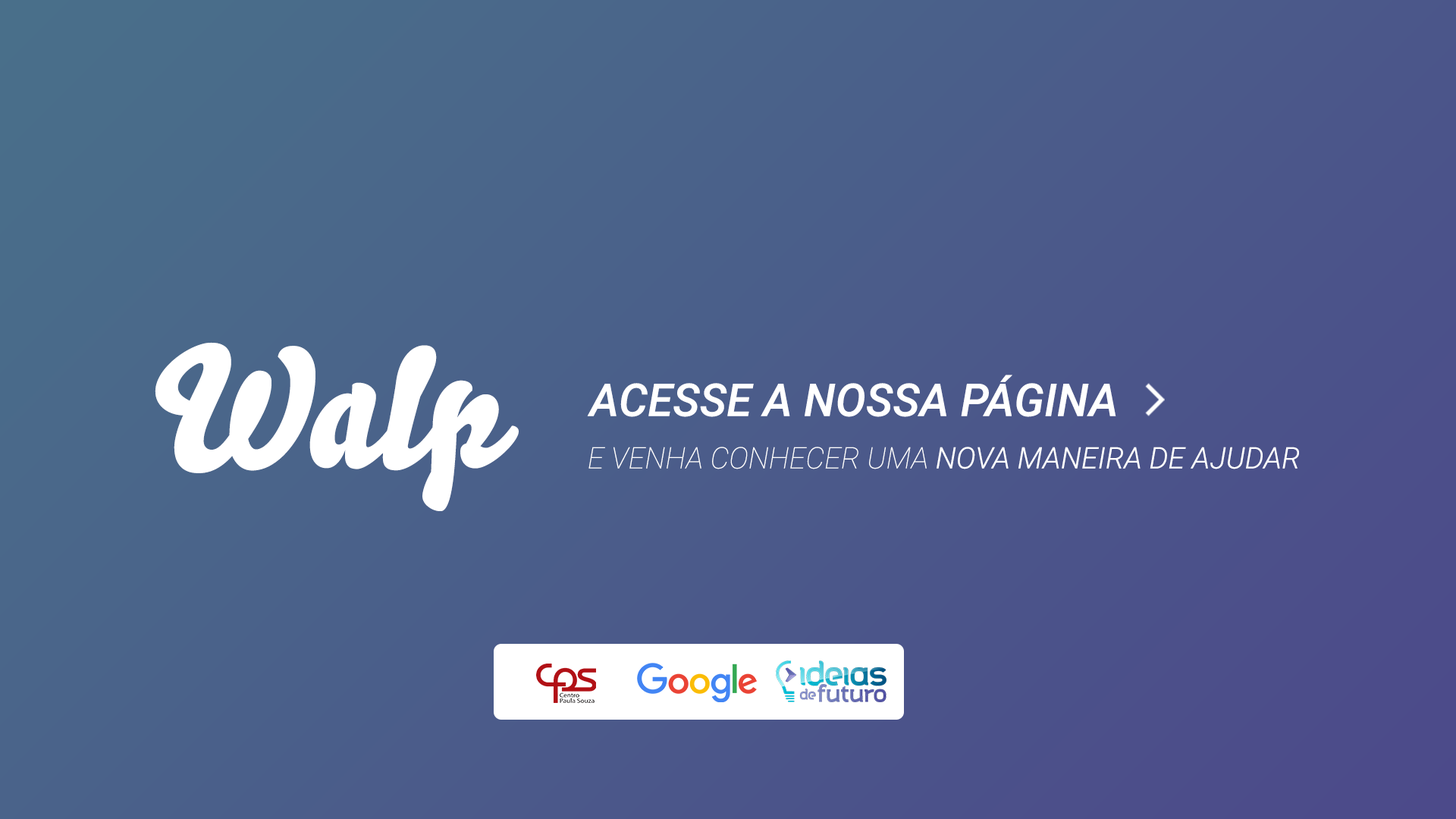
<style>
.page{position:relative;width:1456px;height:819px}
.page>*{position:absolute;margin:0}
.t1{font:167.5px "Bello-Pro";color:#ffffff}
.t2{font:45.4px "Roboto-MediumItalic";color:#ffffff}
.t3{font:29.6px "Roboto-LightItalic";color:#ffffff}
.t4{font:29.6px "Roboto-ThinItalic";color:#ffffff}
</style>
<div class="page">
<p class="t1" style="left:155px;top:342px;width:364px;height:169px">Walp</p>
<p class="t2" style="left:587px;top:375px;width:529px;height:42px">ACESSE A NOSSA PÁGINA</p>
<p class="t3" style="left:588px;top:447px;width:711px;height:22px"><span class="t4">E VENHA CONHECER UMA </span>NOVA MANEIRA DE AJUDAR</p>
</div>
